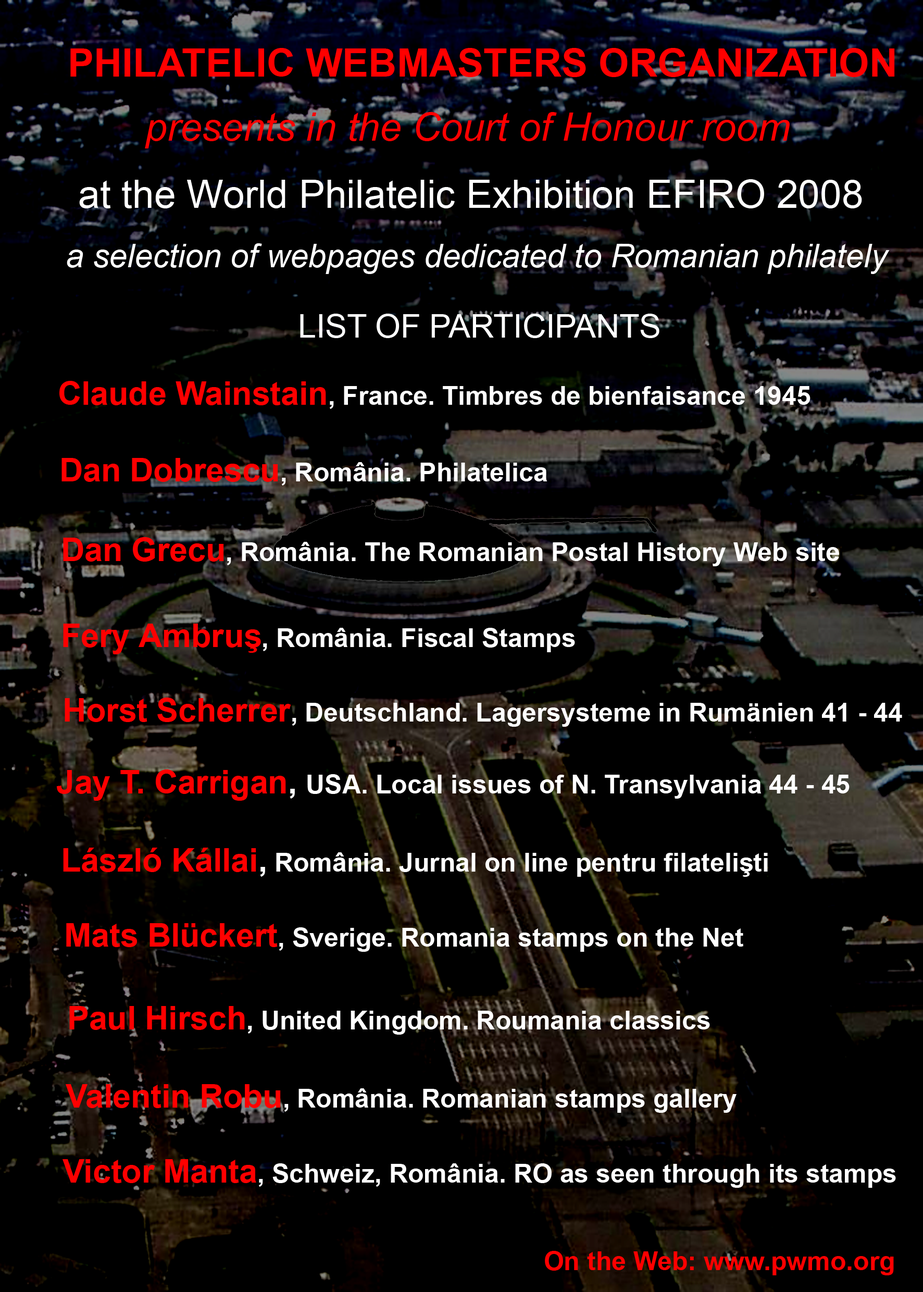
<style>
.page{position:relative;width:923px;height:1292px;background:#000000}
.page>*{position:absolute;margin:0}
.t1{font:39.1px "Arial-BoldMT";color:#ff0000}
.t2{font:39.1px "Arial-ItalicMT";color:#ff0000}
.t3{font:39.1px "ArialMT";color:#ffffff}
.t4{font:32.6px "Arial-ItalicMT";color:#ffffff}
.t5{font:32.6px "ArialMT";color:#ffffff}
.t6{font:26px "Arial-BoldMT";color:#ffffff}
.t7{font:32.6px "Arial-BoldMT";color:#ff0000}
.t8{font:32.6px "Arial-BoldMT";color:#ffffff}
.t9{font:32.6px "Arial-BoldMT";color:#ff0101}
.t10{font:26px "Arial-BoldMT";color:#ff0000}
</style>
<div class="page">
<p class="t1" style="left:70px;top:48px;width:825px;height:29px">PHILATELIC WEBMASTERS ORGANIZATION</p>
<p class="t2" style="left:145px;top:112px;width:645px;height:36px">presents in the Court of Honour room</p>
<p class="t3" style="left:79px;top:179px;width:783px;height:29px">at the World Philatelic Exhibition EFIRO 2008</p>
<p class="t4" style="left:67px;top:243px;width:823px;height:31px">a selection of webpages dedicated to Romanian philately</p>
<p class="t5" style="left:300px;top:314px;width:359px;height:24px">LIST OF PARTICIPANTS</p>
<p class="t6" style="left:59px;top:381px;width:752px;height:28px"><span class="t7">Claude Wainstain</span>, France. Timbres de bienfaisance 1945</p>
<p class="t6" style="left:61px;top:458px;width:486px;height:27px"><span class="t7">Dan Dobrescu</span>, România. Philatelica</p>
<p class="t6" style="left:63px;top:537px;width:776px;height:29px"><span class="t7">Dan Grecu</span>, România. The Romanian Postal History Web site</p>
<p class="t6" style="left:63px;top:624px;width:512px;height:30px"><span class="t7">Fery Ambruş</span>, România. Fiscal Stamps</p>
<p class="t6" style="left:65px;top:697px;width:837px;height:30px"><span class="t7">Horst Scherrer</span>, Deutschland. Lagersysteme in Rumänien 41 - 44</p>
<p class="t6" style="left:57px;top:769px;width:793px;height:32px"><span class="t7">Jay T. Carrigan</span><span class="t8">, </span>USA. Local issues of N. Transylvania 44 - 45</p>
<p class="t6" style="left:63px;top:848px;width:705px;height:29px"><span class="t7">László Kállai</span><span class="t8">,</span> România. Jurnal on line pentru filatelişti</p>
<p class="t6" style="left:66px;top:923px;width:677px;height:29px"><span class="t9">Mats Blückert</span>, Sverige. Romania stamps on the Net</p>
<p class="t6" style="left:69px;top:1006px;width:641px;height:29px"><span class="t7">Paul Hirsch</span>, United Kingdom. Roumania classics</p>
<p class="t6" style="left:66px;top:1084px;width:671px;height:29px"><span class="t7">Valentin Robu</span>, România. Romanian stamps gallery</p>
<p class="t6" style="left:63px;top:1159px;width:833px;height:29px"><span class="t7">Victor Manta</span>, Schweiz, România. RO as seen through its stamps</p>
<p class="t10" style="left:545px;top:1251px;width:349px;height:24px">On the Web: www.pwmo.org</p>
</div>
